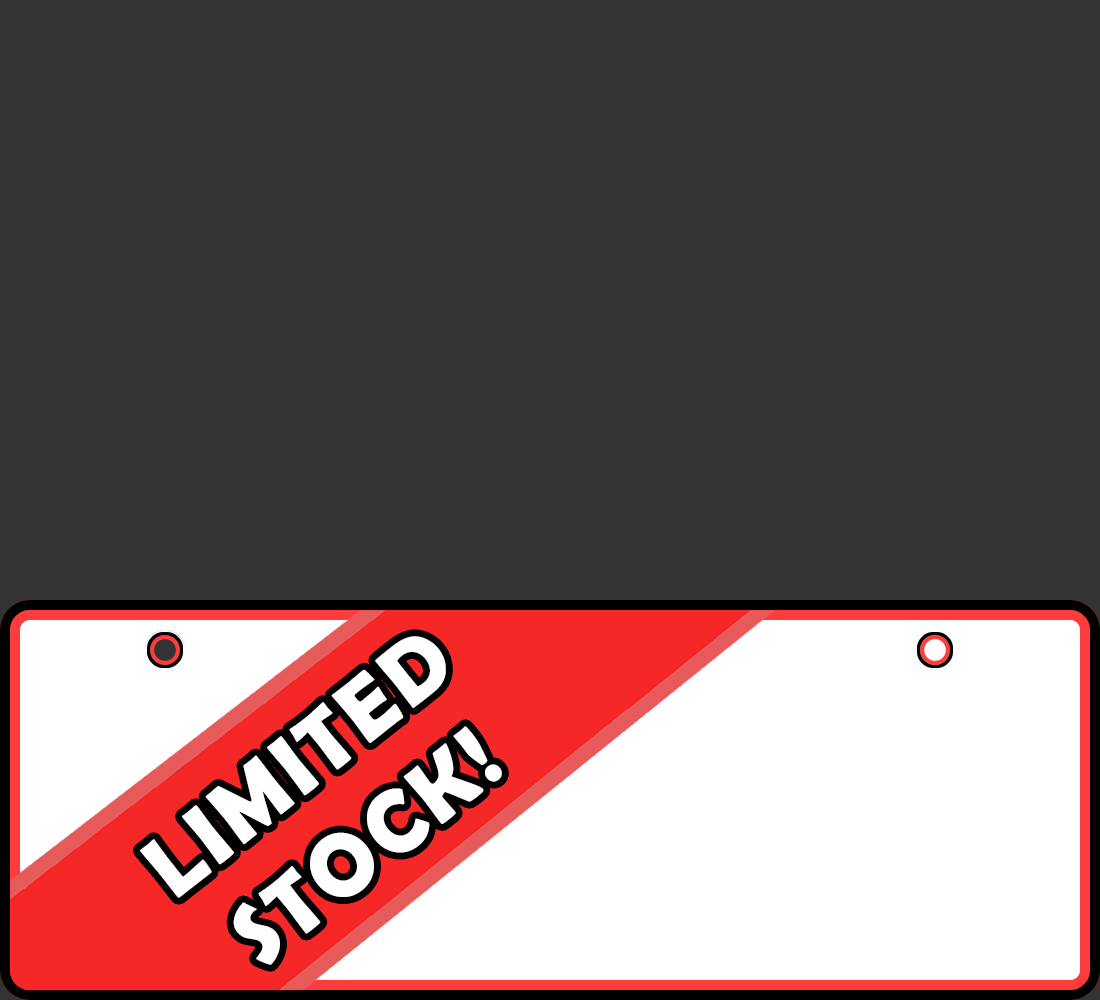
<style>
.page{position:relative;width:1100px;height:1000px;background:#333333}
.page>*{position:absolute;margin:0}
.t1{font:90px "BerlinSansFBDemi-Bold";letter-spacing:0.05em;color:#ffffff}
</style>
<div class="page">
<p class="t1" style="left:140px;top:636px;width:362px;height:329px;text-align:center;rotate:-39deg">LIMITED<br>STOCK!</p>
</div>
